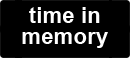
<style>
.page{position:relative;width:130px;height:58px;background:#000000}
.page>*{position:absolute;margin:0}
.t1{font:22.1px/20.8px "Arial-BoldMT";color:#ffffff}
</style>
<div class="page">
<p class="t1" style="left:22px;top:7px;width:86px;height:41px;text-align:center">time in<br>memory</p>
</div>
